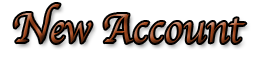
<style>
.page{position:relative;width:256px;height:64px;background:#ffffff}
.page>*{position:absolute;margin:0}
.t1{font:41.7px "Apple-Chancery"}
</style>
<div class="page">
<p class="t1" style="left:14px;top:4px;width:232px;height:39px">New Account</p>
</div>
